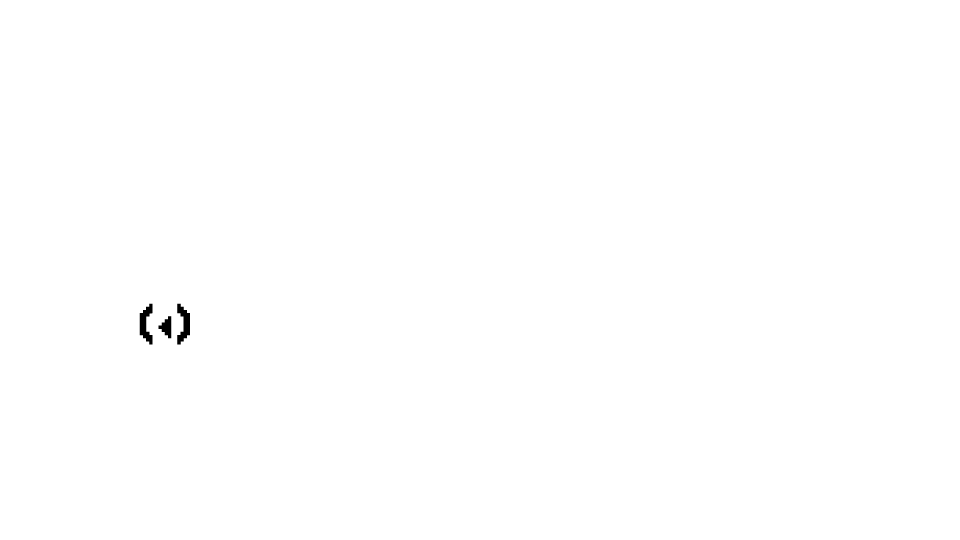
<style>
.page{position:relative;width:960px;height:540px;background:#ffffff}
.page>*{position:absolute;margin:0}
.t1{font:50px "ReturnOfGanonReg";color:#000000}
</style>
<div class="page">
<p class="t1" style="left:139px;top:303px;width:51px;height:42px">(&lt;)</p>
</div>
